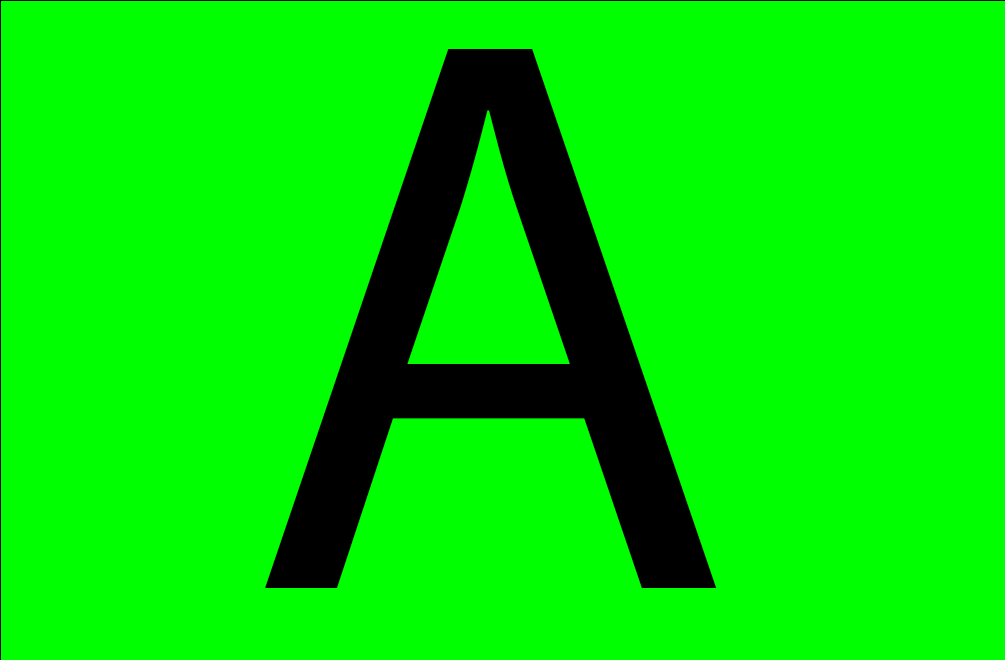
<style>
.page{position:relative;width:1005px;height:660px;background:#00ff00}
.page>*{position:absolute;margin:0}
.t1{font:800px "MyriadPro-Regular";color:#000000}
.t2{font:400px "MyriadPro-Regular";color:#000000}
</style>
<div class="page">
<p class="t1" style="left:265px;top:49px;width:452px;height:539px"><span class="t2"><br></span>A</p>
</div>
